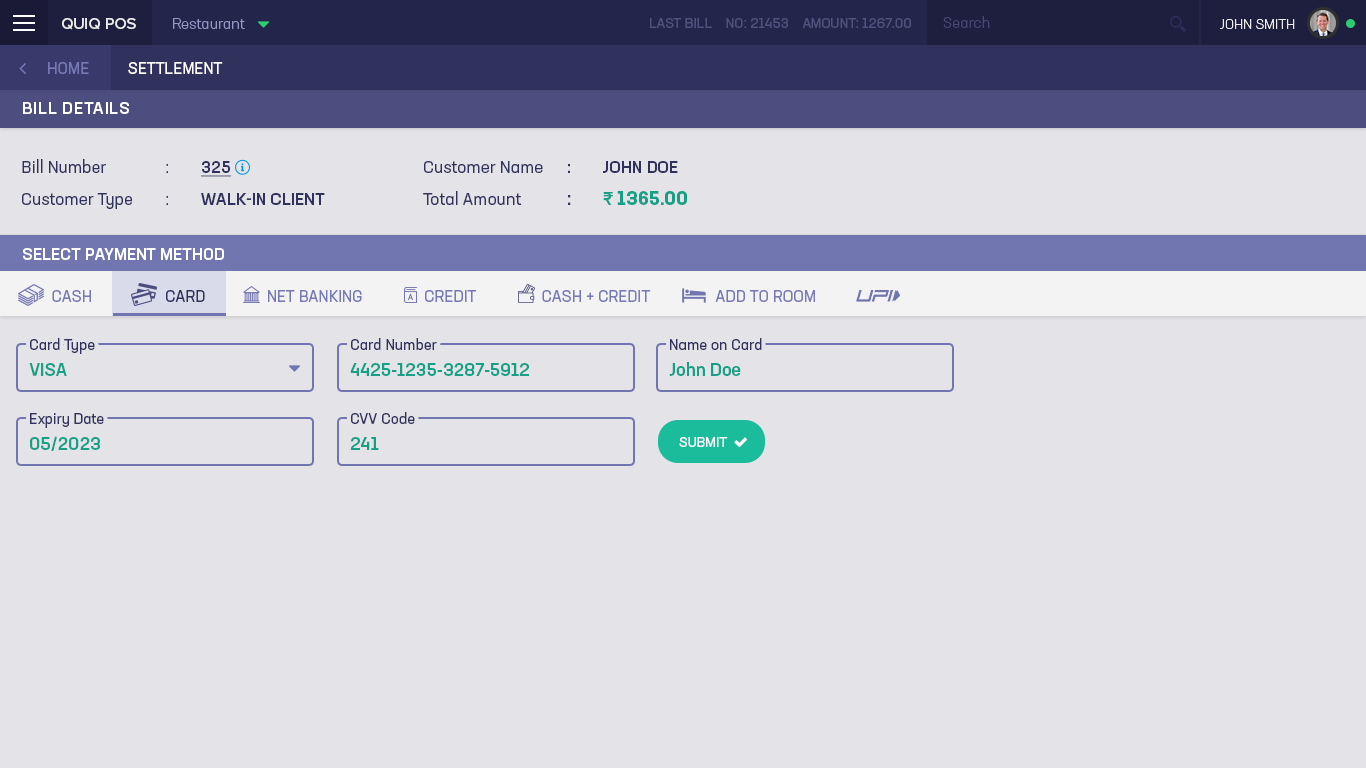
<style>
.page{position:relative;width:1366px;height:768px;background:#e3e3e8}
.page>*{position:absolute;margin:0}
.t1{font:15px "NeusaNextStd-Light";color:#474975}
.t2{font:16px "ProximaNova-Medium";color:#ededed}
.t3{font:15px "NeusaNextStd-Light";color:#9597c4}
.t4{font:14px "NeusaNextStd-Regular";color:#50537d;text-transform:uppercase}
.t5{font:14px "NeusaNextStd-Light";color:#ededed;text-transform:uppercase}
.t6{font:16px "NeusaNextStd-Regular";color:#767ab5;text-transform:uppercase}
.t7{font:16px "NeusaNextStd-Regular";color:#ffffff;text-transform:uppercase}
.t8{font:17px "NeusaNextStd-Medium";letter-spacing:0.04em;color:#ffffff;text-transform:uppercase}
.t9{font:17px/32px "NeusaNextStd-Regular";color:#30325d}
.t10{font:17px/32px "NeusaNextStd-Medium";color:#30325d;text-transform:uppercase;text-decoration:underline}
.t11{font:17px/32px "NeusaNextStd-Medium";color:#30325d;text-transform:uppercase}
.t12{font:17px/32px "NeusaNextStd-Medium";color:#30325d}
.t13{font:19px/32px "NeusaNextStd-Medium";color:#30325d}
.t14{font:19px/32px "ProximaNova-Semibold";color:#16a085}
.t15{font:19px/32px "NeusaNextStd-Bold";color:#16a085}
.t16{font:17px "NeusaNextStd-Medium";color:#ffffff;text-transform:uppercase}
.t17{font:16px "NeusaNextStd-Regular";color:#30325d;text-transform:uppercase}
.t18{font:15px "NeusaNextStd-Regular";color:#30325d}
.t19{font:18px "NeusaNextStd-Medium";color:#16a085}
</style>
<div class="page">
<p class="t1" style="left:943px;top:16px;width:47px;height:12px">Search</p>
<p class="t2" style="left:62px;top:18px;width:74px;height:12px">QUIQ POS</p>
<p class="t3" style="left:173px;top:18px;width:72px;height:11px">Restaurant</p>
<p class="t4" style="left:650px;top:18px;width:261px;height:10px">Last Bill    NO: 21453    Amount: 1267.00</p>
<p class="t5" style="left:1220px;top:19px;width:75px;height:10px">John Smith</p>
<p class="t6" style="left:48px;top:62px;width:41px;height:12px">Home</p>
<p class="t7" style="left:128px;top:62px;width:95px;height:12px">Settlement</p>
<p class="t8" style="left:23px;top:102px;width:106px;height:12px">Bill Details</p>
<p class="t9" style="left:22px;top:159px;width:303px;height:50px">Bill Number  : <span class="t10">325<br></span>Customer Type : <span class="t11">Walk-in Client</span></p>
<p class="t9" style="left:423px;top:161px;width:264px;height:44px">Customer Name<span class="t12"> : </span><span class="t11">John Doe<br></span>Total Amount  <span class="t13">: </span><span class="t14">₹</span><span class="t15"> 1365.00</span></p>
<p class="t16" style="left:23px;top:248px;width:201px;height:12px">Select Payment Method</p>
<p class="t6" style="left:52px;top:290px;width:763px;height:12px"><span class="t17">        </span>Cash                   <span class="t17">Card</span>                Net Banking                Credit                 Cash + Credit                 Add to Room</p>
<p class="t18" style="left:30px;top:338px;width:65px;height:16px">Card Type</p>
<p class="t18" style="left:351px;top:338px;width:86px;height:12px">Card Number</p>
<p class="t18" style="left:670px;top:338px;width:92px;height:12px">Name on Card</p>
<p class="t19" style="left:29px;top:363px;width:38px;height:13px">VISA</p>
<p class="t19" style="left:350px;top:363px;width:179px;height:13px">4425-1235-3287-5912</p>
<p class="t19" style="left:669px;top:362px;width:72px;height:14px">John Doe</p>
<p class="t18" style="left:30px;top:413px;width:74px;height:15px">Expiry Date</p>
<p class="t18" style="left:351px;top:412px;width:64px;height:12px">CVV Code</p>
<p class="t19" style="left:30px;top:436px;width:70px;height:15px">05/2023</p>
<p class="t19" style="left:350px;top:437px;width:29px;height:13px">241</p>
</div>
